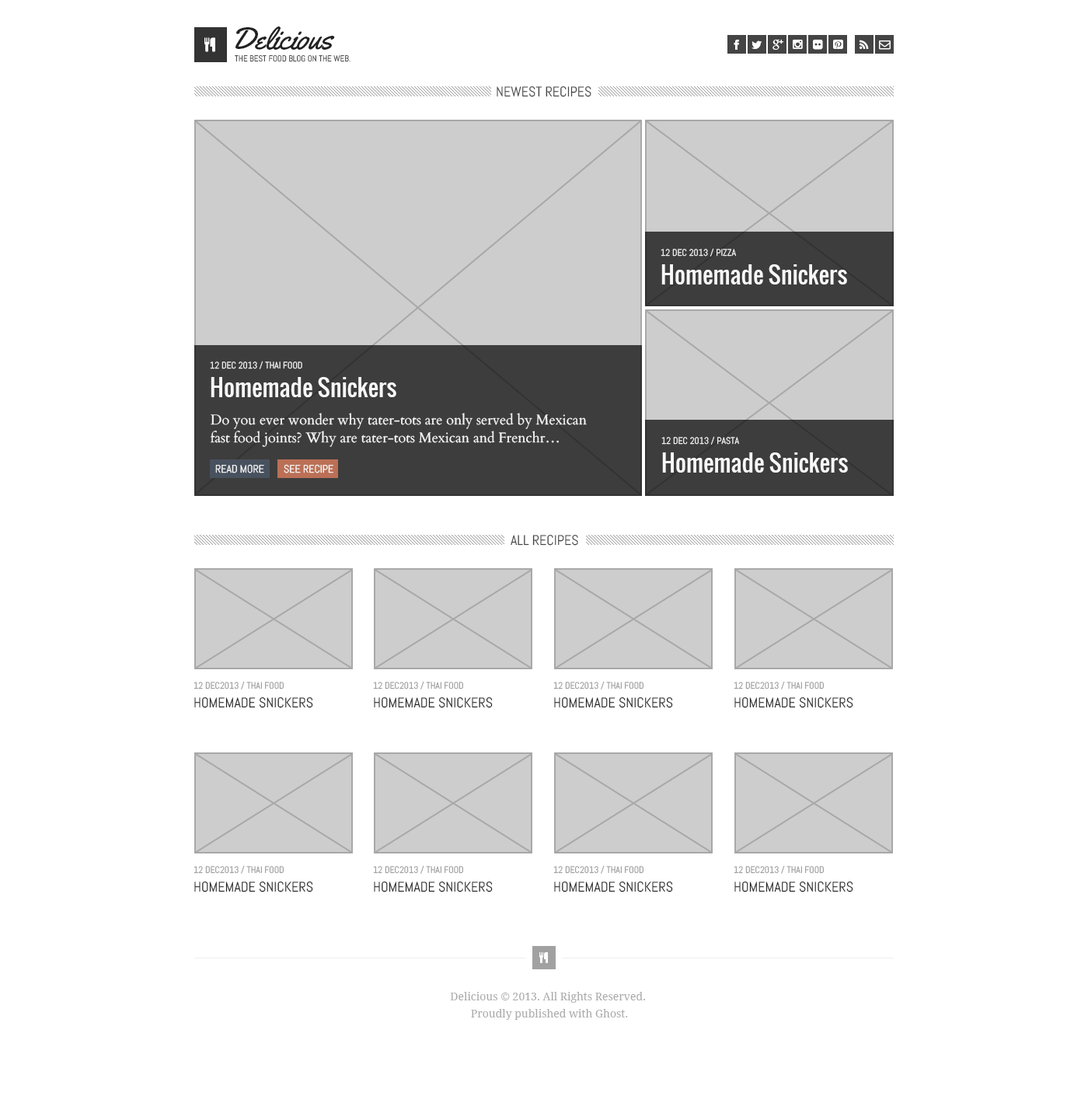
<style>
.page{position:relative;width:1088px;height:1096px;background:#ffffff}
.page>*{position:absolute;margin:0}
.t1{font:31.1px "Yellowtail";color:#222222}
.t2{font:8.5px "Abel-Regular";color:#444444;text-transform:uppercase}
.t3{font:14px "Abel-Regular";color:#444444;text-transform:uppercase}
.t4{font:9.3px "Abel-Regular";color:#f7f7f7;text-transform:uppercase}
.t5{font:23.3px "Oswald-Regular";color:#f7f7f7}
.t6{font:14px/17.9px "Cardo-Regular";color:#f7f7f7}
.t7{font:10.9px "Abel-Regular";color:#f7f7f7;text-transform:uppercase}
.t8{font:9.3px "Abel-Regular";color:#999999;text-transform:uppercase}
.t9{font:14px "Abel-Regular";color:#222222;text-transform:uppercase}
.t10{font:10.9px/17.1px "DroidSerif";color:#aaaaaa}
</style>
<div class="page">
<p class="t1" style="left:235px;top:26px;width:100px;height:24px">Delicious</p>
<p class="t2" style="left:235px;top:55px;width:116px;height:7px">The best food blog On the web.</p>
<p class="t3" style="left:497px;top:86px;width:94px;height:11px">Newest Recipes</p>
<p class="t4" style="left:661px;top:248px;width:75px;height:8px">12 Dec 2013 / Pizza</p>
<p class="t5" style="left:661px;top:264px;width:186px;height:20px">Homemade Snickers</p>
<p class="t4" style="left:210px;top:361px;width:92px;height:8px">12 Dec 2013 / Thai Food</p>
<p class="t5" style="left:211px;top:377px;width:185px;height:20px">Homemade Snickers</p>
<p class="t6" style="left:211px;top:413px;width:376px;height:34px">Do you ever wonder why tater-tots are only served by Mexican fast food joints? Why are tater-tots Mexican and Frenchr…</p>
<p class="t4" style="left:661px;top:436px;width:78px;height:9px">12 Dec 2013 / Pasta</p>
<p class="t5" style="left:662px;top:452px;width:186px;height:21px">Homemade Snickers</p>
<p class="t7" style="left:215px;top:464px;width:49px;height:9px">Read More</p>
<p class="t7" style="left:284px;top:464px;width:49px;height:9px">See Recipe</p>
<p class="t3" style="left:511px;top:535px;width:67px;height:11px">All Recipes</p>
<p class="t8" style="left:194px;top:681px;width:90px;height:8px">12 Dec2013 / Thai Food</p>
<p class="t8" style="left:373px;top:681px;width:90px;height:8px">12 Dec2013 / Thai Food</p>
<p class="t8" style="left:553px;top:681px;width:91px;height:8px">12 Dec2013 / Thai Food</p>
<p class="t8" style="left:734px;top:681px;width:90px;height:8px">12 Dec2013 / Thai Food</p>
<p class="t9" style="left:194px;top:697px;width:119px;height:11px">Homemade Snickers</p>
<p class="t9" style="left:374px;top:697px;width:119px;height:11px">Homemade Snickers</p>
<p class="t9" style="left:554px;top:697px;width:119px;height:11px">Homemade Snickers</p>
<p class="t9" style="left:734px;top:697px;width:119px;height:11px">Homemade Snickers</p>
<p class="t8" style="left:194px;top:865px;width:90px;height:9px">12 Dec2013 / Thai Food</p>
<p class="t8" style="left:373px;top:865px;width:90px;height:9px">12 Dec2013 / Thai Food</p>
<p class="t8" style="left:553px;top:865px;width:91px;height:9px">12 Dec2013 / Thai Food</p>
<p class="t8" style="left:734px;top:865px;width:90px;height:9px">12 Dec2013 / Thai Food</p>
<p class="t9" style="left:194px;top:881px;width:119px;height:11px">Homemade Snickers</p>
<p class="t9" style="left:374px;top:881px;width:119px;height:11px">Homemade Snickers</p>
<p class="t9" style="left:554px;top:881px;width:119px;height:11px">Homemade Snickers</p>
<p class="t9" style="left:734px;top:881px;width:119px;height:11px">Homemade Snickers</p>
<p class="t10" style="left:450px;top:992px;width:195px;height:28px;text-align:center">Delicious © 2013. All Rights Reserved. <br>Proudly published with Ghost.</p>
</div>
